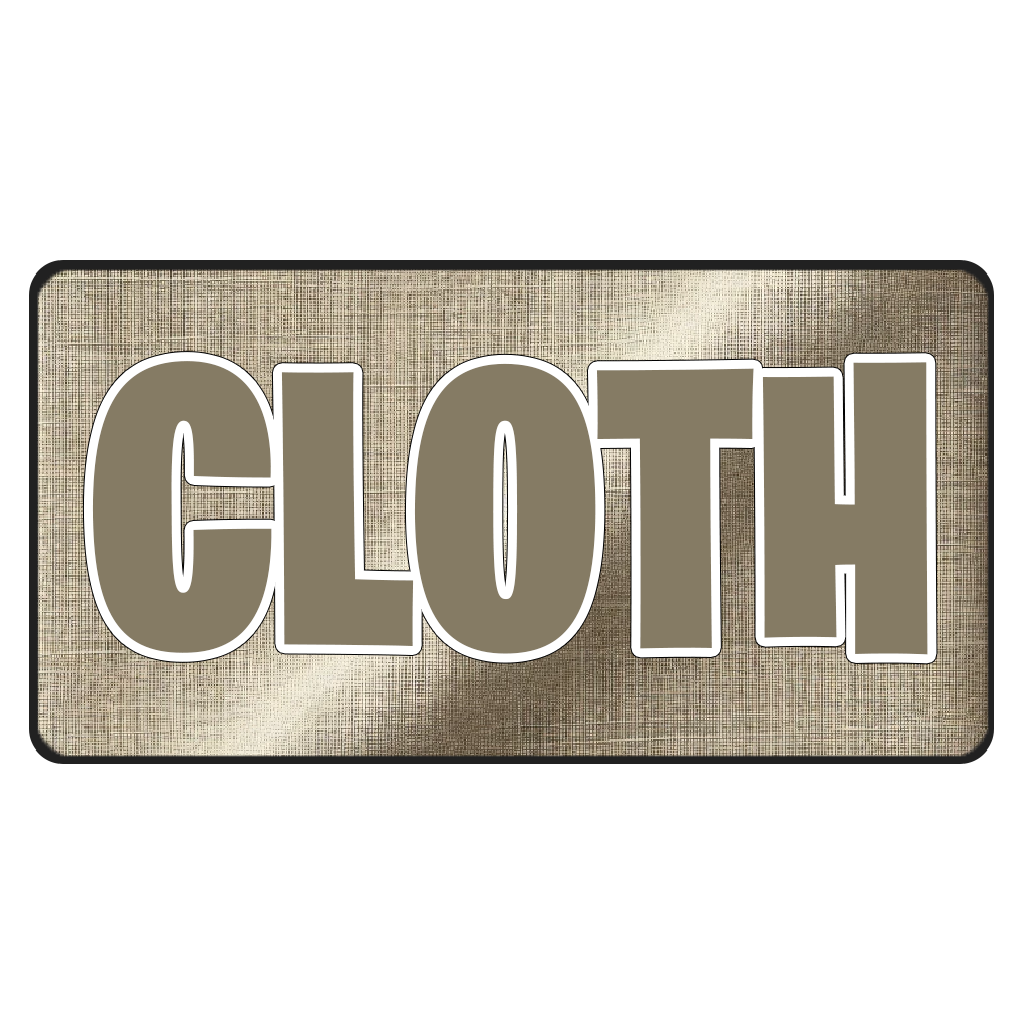
<style>
.page{position:relative;width:1024px;height:1024px;background:#ffffff}
.page>*{position:absolute;margin:0}
.t1{font:397.3px "BurbankBigCondensed-Black";color:#857b64}
</style>
<div class="page">
<p class="t1" style="left:92px;top:361px;width:836px;height:294px">CLOTH</p>
</div>
